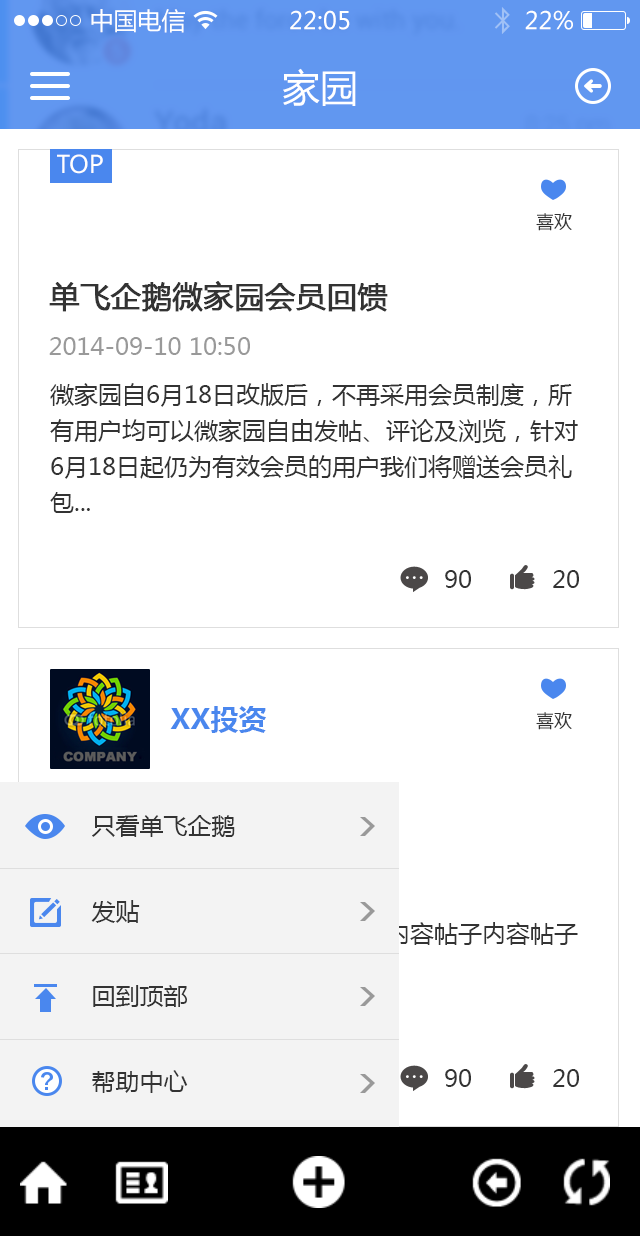
<style>
.page{position:relative;width:640px;height:1236px;background:#ffffff}
.page>*{position:absolute;margin:0}
.t1{font:24px "MicrosoftYaHei";color:#ffffff}
.t2{font:38px "MicrosoftYaHei";color:#ffffff}
.t3{font:24px "MicrosoftYaHei";color:#fffefe;text-transform:uppercase}
.t4{font:18px "MicrosoftYaHei";color:#333333}
.t5{font:30px "MicrosoftYaHei";color:#333333;font-weight:bold}
.t6{font:24px "MicrosoftYaHei";color:#999999}
.t7{font:24px/36px "MicrosoftYaHei";color:#333333}
.t8{font:24px "MicrosoftYaHei";color:#333333}
.t9{font:28px "MicrosoftYaHei-Bold";color:#4a87ee}
.t10{font:24px/36px "MicrosoftYaHei";color:#f3f3f3}
</style>
<div class="page">
<p class="t1" style="left:91px;top:9px;width:94px;height:24px">中国电信</p>
<p class="t1" style="left:290px;top:10px;width:60px;height:20px">22:05</p>
<p class="t1" style="left:525px;top:10px;width:48px;height:20px">22%</p>
<p class="t2" style="left:283px;top:68px;width:73px;height:38px">家园</p>
<p class="t3" style="left:57px;top:154px;width:46px;height:20px">top</p>
<p class="t4" style="left:536px;top:213px;width:36px;height:18px">喜欢</p>
<p class="t5" style="left:49px;top:281px;width:339px;height:31px">单飞企鹅微家园会员回馈</p>
<p class="t6" style="left:49px;top:337px;width:201px;height:18px">2014-09-10 10:50</p>
<p class="t7" style="left:50px;top:383px;width:528px;height:130px">微家园自6月18日改版后，不再采用会员制度，所有用户均可以微家园自由发帖、评论及浏览，针对6月18日起仍为有效会员的用户我们将赠送会员礼包...</p>
<p class="t8" style="left:445px;top:570px;width:26px;height:18px">90</p>
<p class="t8" style="left:553px;top:570px;width:26px;height:18px">20</p>
<p class="t9" style="left:170px;top:706px;width:96px;height:27px">XX投资</p>
<p class="t4" style="left:536px;top:712px;width:36px;height:18px">喜欢</p>
<p class="t8" style="left:92px;top:815px;width:143px;height:22px">只看单飞企鹅</p>
<p class="t8" style="left:91px;top:900px;width:49px;height:23px">发贴</p>
<p class="t10" style="left:51px;top:922px;width:527px;height:59px">帖子内容帖子内容帖子内容帖子内容帖子内容帖子内容，帖子内容</p>
<p class="t8" style="left:93px;top:985px;width:94px;height:22px">回到顶部</p>
<p class="t8" style="left:92px;top:1070px;width:96px;height:23px">帮助中心</p>
<p class="t8" style="left:445px;top:1069px;width:26px;height:18px">90</p>
<p class="t8" style="left:553px;top:1069px;width:26px;height:18px">20</p>
</div>
